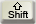
<style>
.page{position:relative;width:36px;height:24px}
.page>*{position:absolute;margin:0}
.t1{font:10px "ArialMT";color:#000000}
</style>
<div class="page">
<p class="t1" style="left:8px;top:11px;width:20px;height:7px">Shift</p>
</div>
